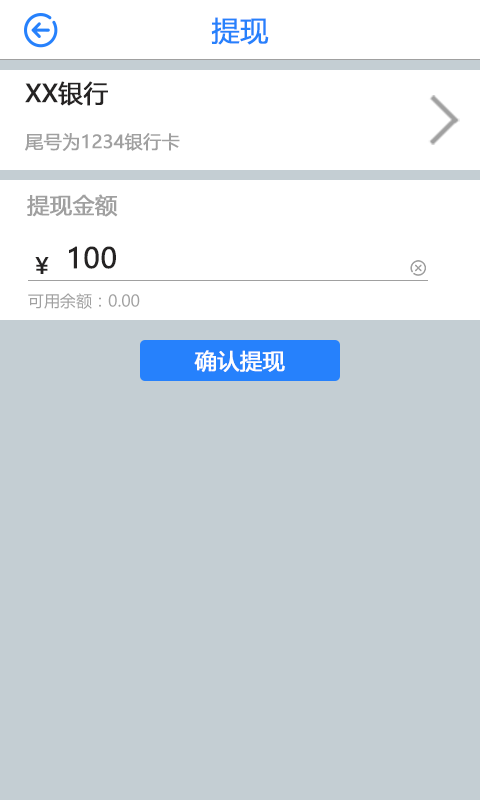
<style>
.page{position:relative;width:480px;height:800px;background:#c4ced3}
.page>*{position:absolute;margin:0}
.t1{font:28px "MicrosoftYaHei";color:#2681fc;font-weight:bold}
.t2{font:24.5px "MicrosoftYaHei";color:#252323;font-weight:bold}
.t3{font:18px "MicrosoftYaHei";color:#a0a0a0;font-weight:bold}
.t4{font:22px "MicrosoftYaHei";color:#a0a0a0;font-weight:bold}
.t5{font:28px "MicrosoftYaHei";color:#252323;font-weight:bold}
.t6{font:22px "MicrosoftYaHei";color:#252323;font-weight:bold}
.t7{font:16px "MicrosoftYaHei";color:#a0a0a0}
.t8{font:22px "MicrosoftYaHei";color:#fefefe;font-weight:bold}
</style>
<div class="page">
<p class="t1" style="left:211px;top:17px;width:58px;height:28px">提现</p>
<p class="t2" style="left:25px;top:81px;width:83px;height:25px">XX银行</p>
<p class="t3" style="left:25px;top:133px;width:155px;height:18px">尾号为1234银行卡</p>
<p class="t4" style="left:27px;top:194px;width:91px;height:23px">提现金额</p>
<p class="t5" style="left:69px;top:246px;width:47px;height:23px">100</p>
<p class="t6" style="left:35px;top:257px;width:14px;height:17px">￥</p>
<p class="t7" style="left:28px;top:293px;width:112px;height:16px">可用余额：0.00</p>
<p class="t8" style="left:194px;top:350px;width:91px;height:22px">确认提现</p>
</div>
